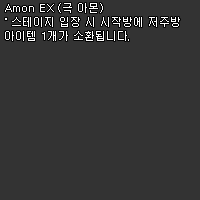
<style>
.page{position:relative;width:200px;height:200px;background:#333333}
.page>*{position:absolute;margin:0}
.t1{font:11px/14px "Dotum";color:#ffffff}
</style>
<div class="page">
<p class="t1" style="left:5px;top:3px;width:175px;height:38px">Amon EX (극 아몬)<br>˚ 스테이지 입장 시 시작방에 저주방<br>아이템 1개가 소환됩니다.</p>
</div>
